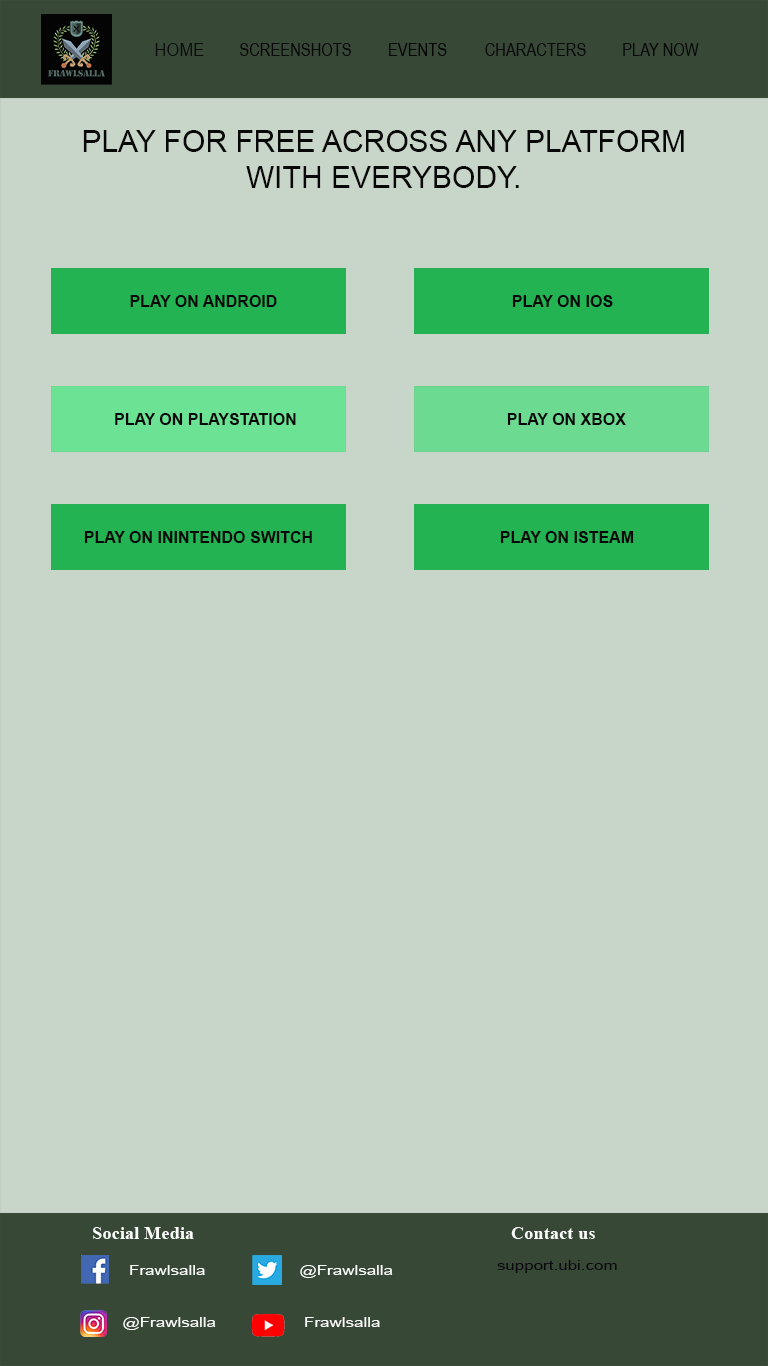
<style>
.page{position:relative;width:768px;height:1366px;background:#c8d5c9}
.page>*{position:absolute;margin:0}
.t1{font:18px "ArialNarrow";color:#0a0b0a;scale:1.13 1}
.t2{font:18px "ArialNarrow";color:#090909}
.t3{font:18px "ArialNarrow";color:#060606}
.t4{font:18px "ArialNarrow";color:#0a0a0a}
.t5{font:30px "ArialMT";color:#080808}
.t6{font:16px "Arial-BoldMT";color:#080808}
.t7{font:18.5px "TimesNewRomanPS-BoldMT";color:#fbfdfb}
.t8{font:14px "ArialMT";color:#fbfdfb;scale:1.21 1}
.t9{font:14px "ArialMT";color:#08080d;scale:1.21 1}
</style>
<div class="page">
<p class="t1" style="left:155px;top:43px;width:49px;height:13px">HOME</p>
<p class="t2" style="left:239px;top:43px;width:112px;height:13px">SCREENSHOTS</p>
<p class="t3" style="left:389px;top:43px;width:58px;height:13px">EVENTS</p>
<p class="t4" style="left:485px;top:43px;width:101px;height:13px">CHARACTERS</p>
<p class="t4" style="left:623px;top:43px;width:76px;height:13px">PLAY NOW</p>
<p class="t5" style="left:83px;top:130px;width:601px;height:58px;text-align:center">PLAY FOR FREE ACROSS ANY PLATFORM<br>WITH EVERYBODY.</p>
<p class="t6" style="left:130px;top:295px;width:147px;height:12px">PLAY ON ANDROID</p>
<p class="t6" style="left:512px;top:295px;width:101px;height:12px">PLAY ON IOS</p>
<p class="t6" style="left:115px;top:413px;width:181px;height:12px">PLAY ON PLAYSTATION</p>
<p class="t6" style="left:507px;top:413px;width:119px;height:12px">PLAY ON XBOX</p>
<p class="t6" style="left:84px;top:531px;width:228px;height:12px">PLAY ON ININTENDO SWITCH</p>
<p class="t6" style="left:500px;top:531px;width:134px;height:12px">PLAY ON ISTEAM</p>
<p class="t7" style="left:93px;top:1227px;width:101px;height:12px">Social Media</p>
<p class="t7" style="left:511px;top:1227px;width:84px;height:12px">Contact us</p>
<p class="t8" style="left:130px;top:1265px;width:75px;height:10px">Frawlsalla</p>
<p class="t8" style="left:300px;top:1265px;width:93px;height:13px">@Frawlsalla</p>
<p class="t9" style="left:497px;top:1260px;width:120px;height:13px">support.ubi.com</p>
<p class="t8" style="left:123px;top:1317px;width:93px;height:13px">@Frawlsalla</p>
<p class="t8" style="left:305px;top:1317px;width:75px;height:10px">Frawlsalla</p>
</div>
